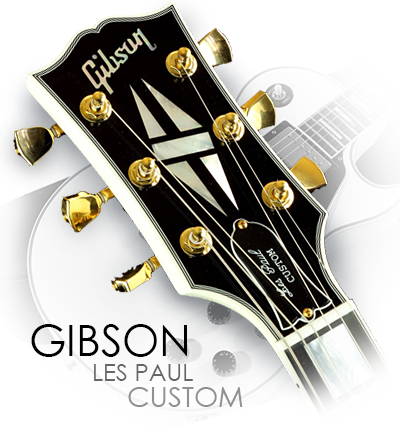
<style>
.page{position:relative;width:400px;height:438px;background:#ffffff}
.page>*{position:absolute;margin:0}
.t1{font:43.1px "CenturyGothic";color:#000000}
.t2{font:24px "CenturyGothic";color:#666666}
.t3{font:28px "CenturyGothic";color:#919090}
</style>
<div class="page">
<p class="t1" style="left:31px;top:324px;width:156px;height:33px">GIBSON</p>
<p class="t2" style="left:94px;top:364px;width:99px;height:17px">LES PAUL</p>
<p class="t3" style="left:128px;top:387px;width:115px;height:20px">CUSTOM</p>
</div>
